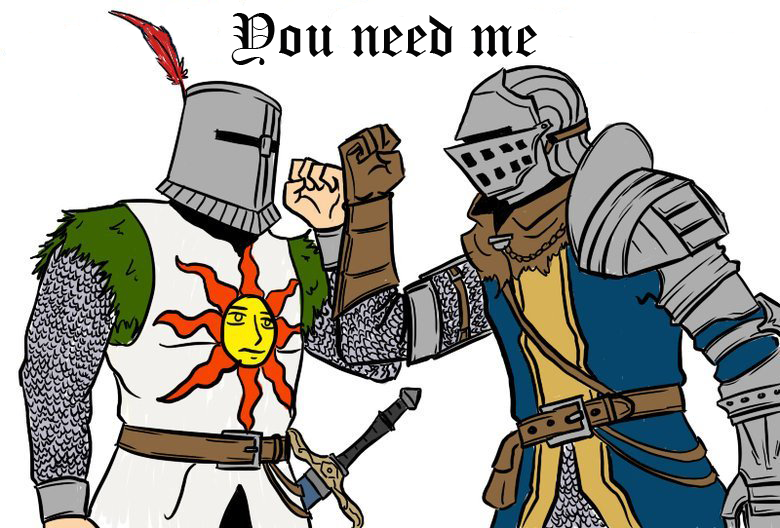
<style>
.page{position:relative;width:780px;height:528px;background:#ffffff}
.page>*{position:absolute;margin:0}
.t1{font:60px "OldEnglishTextMT";color:#050505}
</style>
<div class="page">
<p class="t1" style="left:231px;top:13px;width:306px;height:52px">You need me</p>
</div>
